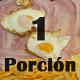
<style>
.page{position:relative;width:80px;height:80px}
.page>*{position:absolute;margin:0}
.t1{font:35px "BritannicBold";color:#1e1c17;text-transform:uppercase;font-weight:bold}
.t2{font:20px "BritannicBold";color:#1d1504;font-weight:bold}
</style>
<div class="page">
<p class="t1" style="left:32px;top:17px;width:13px;height:24px">1</p>
<p class="t2" style="left:4px;top:57px;width:72px;height:15px">Porción</p>
</div>
